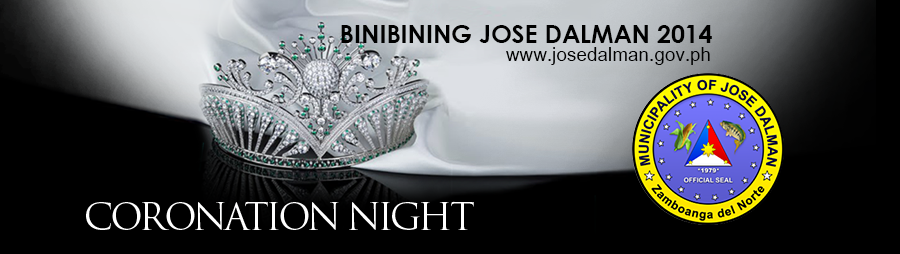
<style>
.page{position:relative;width:900px;height:254px;background:#000000}
.page>*{position:absolute;margin:0}
.t1{font:24.7px "CenturyGothic-Bold";color:#000000;text-transform:uppercase}
.t2{font:26.9px "Utsaah";color:#000000}
.t3{font:36.5px "TrajanPro-Regular";letter-spacing:-0.08em;color:#ffffff;text-transform:uppercase}
</style>
<div class="page">
<p class="t1" style="left:341px;top:25px;width:371px;height:18px">Binibining Jose Dalman 2014</p>
<p class="t2" style="left:506px;top:47px;width:204px;height:18px">www.josedalman.gov.ph</p>
<p class="t3" style="left:86px;top:201px;width:388px;height:29px">CORONATION NIGHT</p>
</div>
